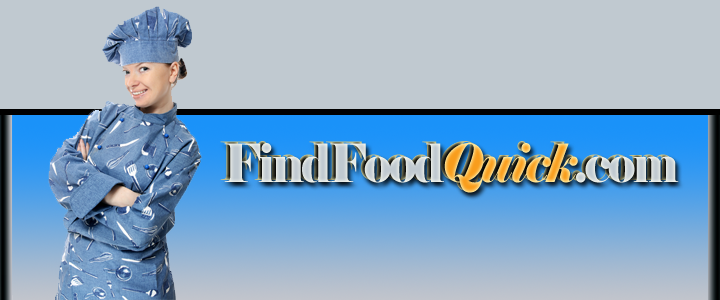
<style>
.page{position:relative;width:720px;height:300px;background:#c0c9d0}
.page>*{position:absolute;margin:0}
.t1{font:52.8px "Elephant-Regular";letter-spacing:-0.05em;scale:0.91 1}
.t2{font:52.8px "Elephant-Italic";letter-spacing:-0.05em;scale:0.91 1}
</style>
<div class="page">
<p class="t1" style="left:220px;top:141px;width:455px;height:50px">FindFood<span class="t2">Quick</span>.com</p>
<p class="t1" style="left:224px;top:143px;width:455px;height:50px">FindFood<span class="t2">Quick</span>.com</p>
</div>
